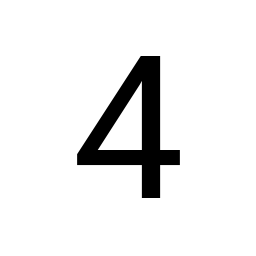
<style>
.page{position:relative;width:256px;height:256px;background:#ffffff}
.page>*{position:absolute;margin:0}
.t1{font:200px "Roboto-Regular";color:#000000}
</style>
<div class="page">
<p class="t1" style="left:77px;top:56px;width:103px;height:142px">4</p>
</div>
